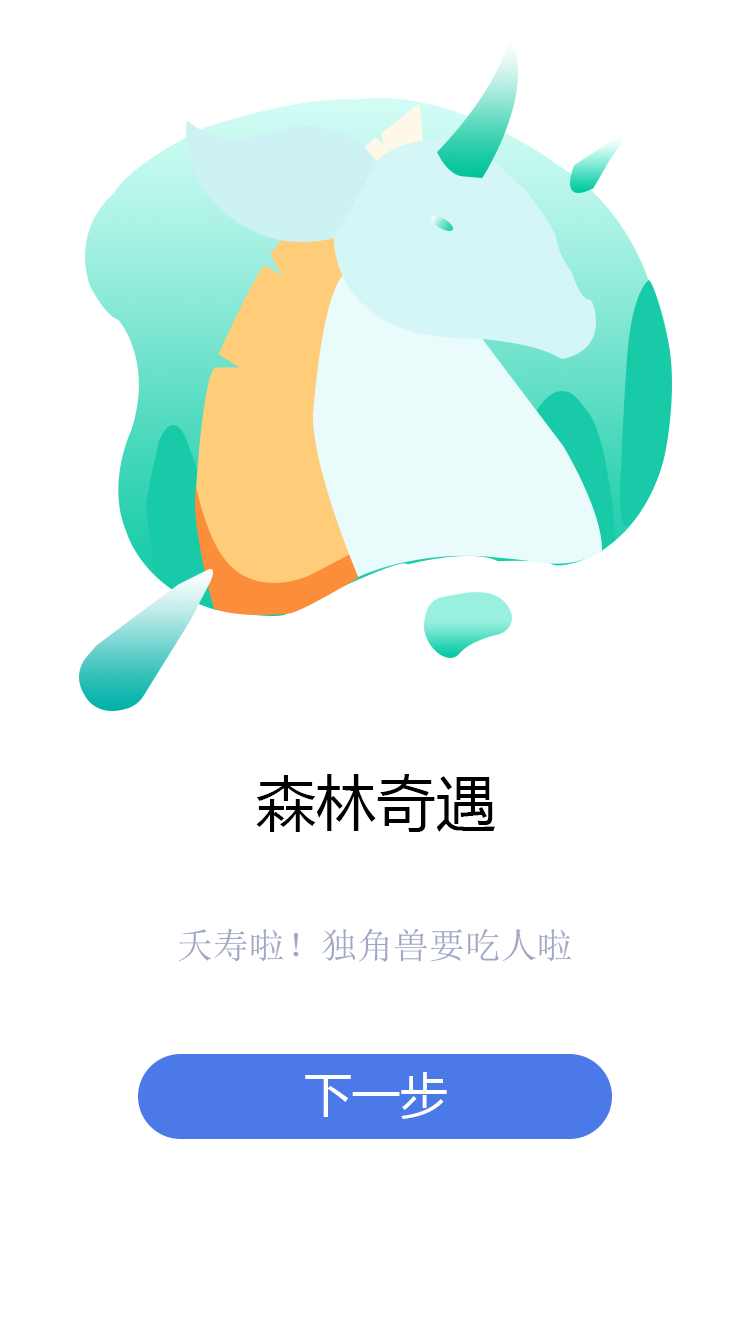
<style>
.page{position:relative;width:750px;height:1334px;background:#ffffff}
.page>*{position:absolute;margin:0}
.t1{font:60px "MicrosoftYaHei";color:#000000}
.t2{font:36px "SimSun";color:#a0a6c4}
.t3{font:48px "MicrosoftYaHei";color:#ffffff}
</style>
<div class="page">
<p class="t1" style="left:256px;top:774px;width:239px;height:58px">森林奇遇</p>
<p class="t2" style="left:179px;top:928px;width:393px;height:34px">夭寿啦！独角兽要吃人啦</p>
<p class="t3" style="left:305px;top:1072px;width:142px;height:47px">下一步</p>
</div>
